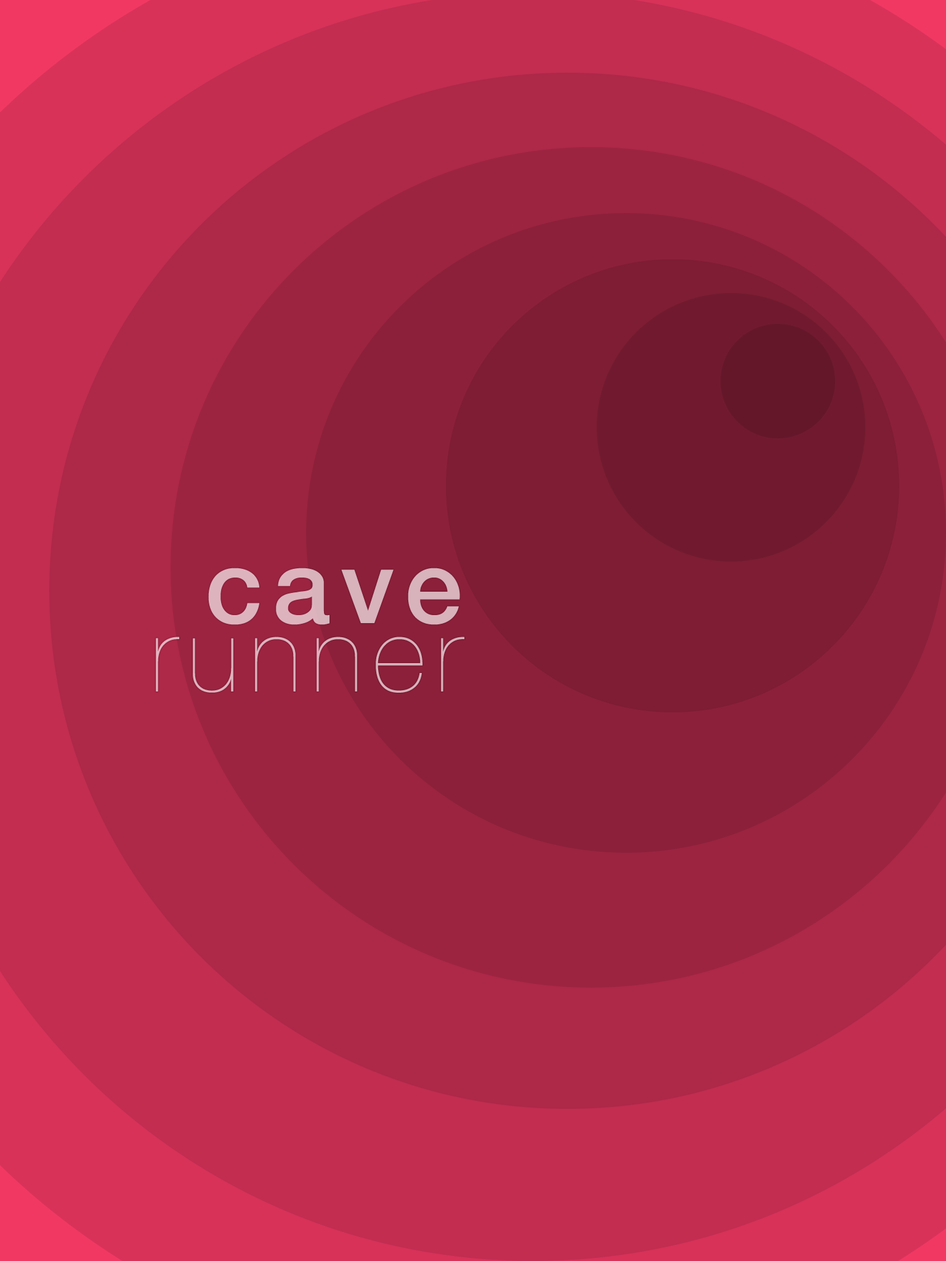
<style>
.page{position:relative;width:946px;height:1261px;background:#c22d50}
.page>*{position:absolute;margin:0}
.t1{font:103.4px "HelveticaNeue-UltraLight";letter-spacing:0.1em;color:#d8b3bc}
.t2{font:103.4px "HelveticaNeue-Medium";letter-spacing:0.1em;color:#d8b3bc}
</style>
<div class="page">
<p class="t1" style="left:156px;top:568px;width:308px;height:125px;text-align:right"><span class="t2">cave<br></span>runner</p>
</div>
